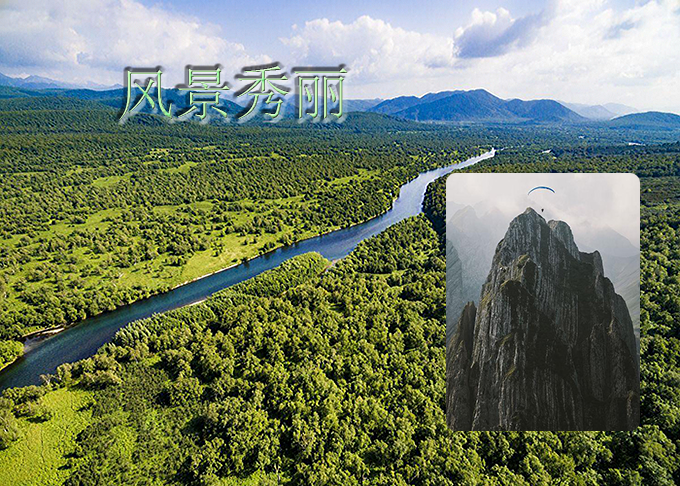
<style>
.page{position:relative;width:680px;height:486px}
.page>*{position:absolute;margin:0}
.t1{font:58.3px "SimSun"}
</style>
<div class="page">
<p class="t1" style="left:119px;top:66px;width:229px;height:54px">风景秀丽</p>
</div>
